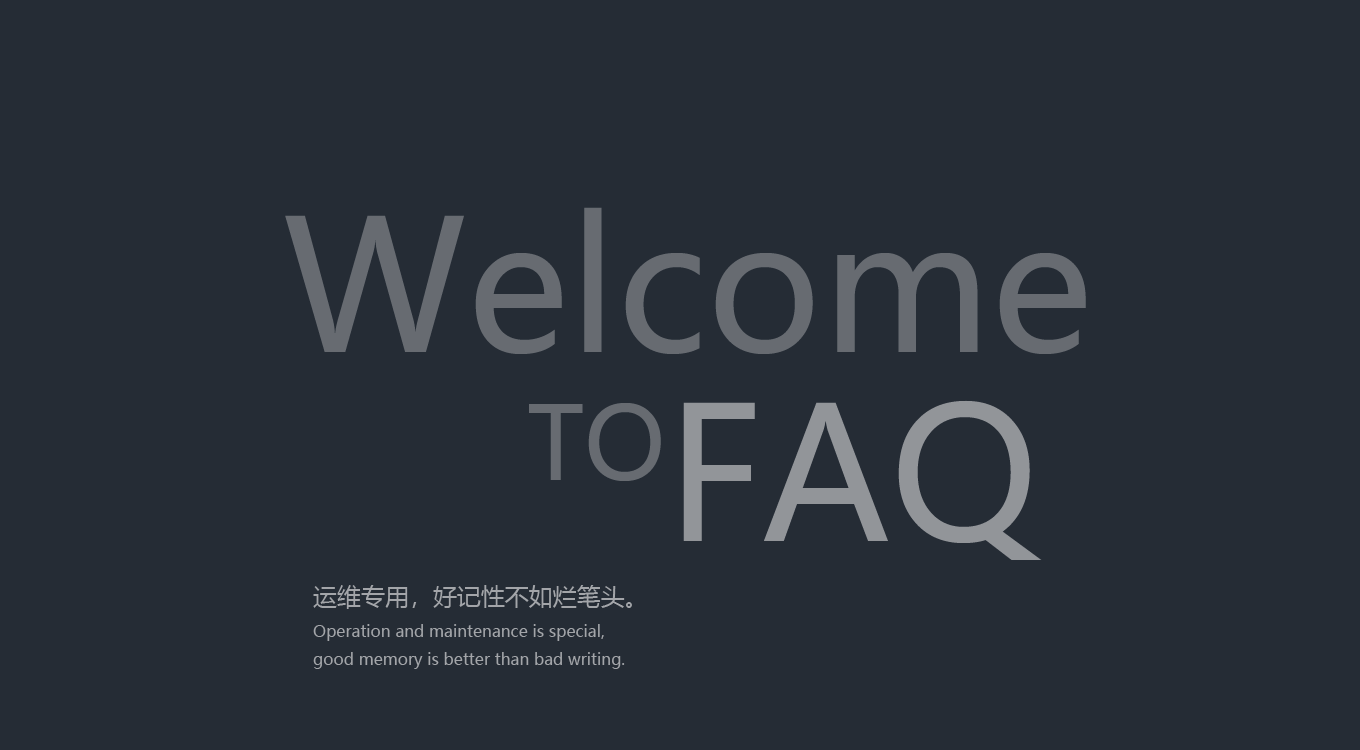
<style>
.page{position:relative;width:1360px;height:750px;background:#252c35}
.page>*{position:absolute;margin:0}
.t1{font:180.2px "MicrosoftYaHei";color:#676b71}
.t2{font:181.6px "MicrosoftYaHei";color:#929599}
.t3{font:100.2px "MicrosoftYaHei";color:#676b71}
.t4{font:24px "MicrosoftYaHei";color:#a3a5a9}
.t5{font:16px "MicrosoftYaHei";color:#a3a5a9}
</style>
<div class="page">
<p class="t1" style="left:285px;top:207px;width:801px;height:147px">Welcome</p>
<p class="t2" style="left:683px;top:400px;width:359px;height:160px">FAQ</p>
<p class="t3" style="left:529px;top:403px;width:132px;height:78px">TO</p>
<p class="t4" style="left:313px;top:585px;width:319px;height:24px">运维专用，好记性不如烂笔头。</p>
<p class="t5" style="left:313px;top:624px;width:312px;height:45px">Operation and maintenance is special, <br>good memory is better than bad writing.</p>
</div>
